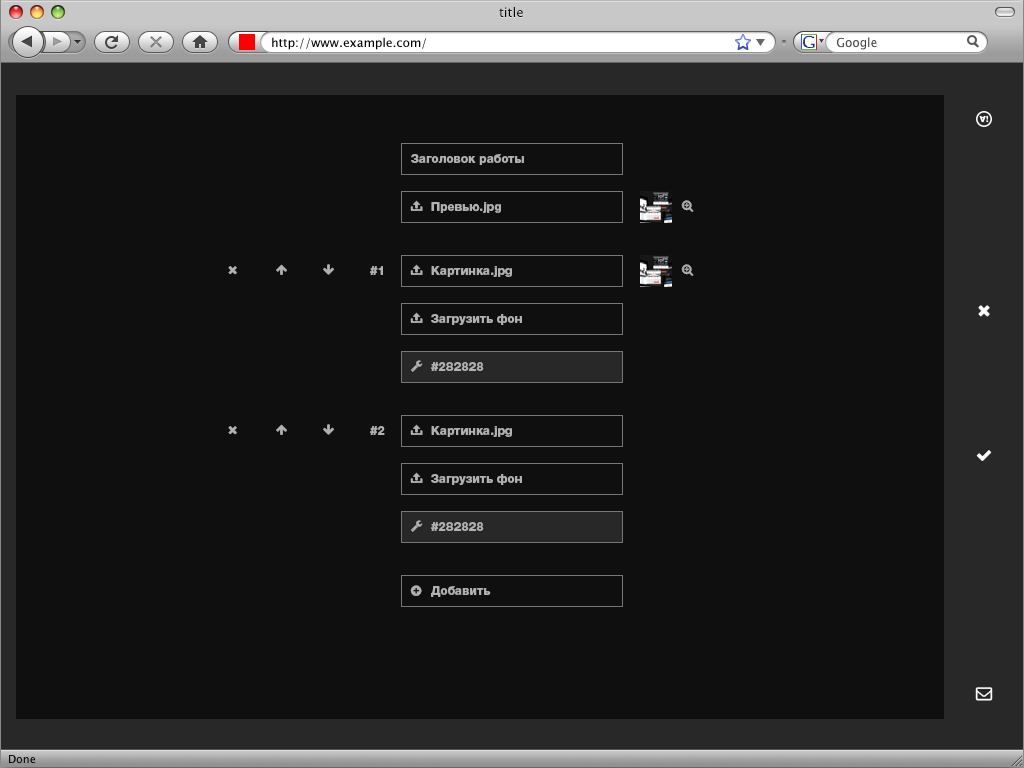
<style>
.page{position:relative;width:1024px;height:768px;background:#0f0f0f}
.page>*{position:absolute;margin:0}
.t1{font:12px "HelveticaNeueCyr-Heavy";color:#b1b1b1}
</style>
<div class="page">
<p class="t1" style="left:411px;top:154px;width:113px;height:11px">Заголовок работы</p>
<p class="t1" style="left:431px;top:202px;width:70px;height:11px">Превью.jpg</p>
<p class="t1" style="left:370px;top:266px;width:13px;height:9px">#1</p>
<p class="t1" style="left:431px;top:266px;width:81px;height:11px">Картинка.jpg</p>
<p class="t1" style="left:431px;top:314px;width:91px;height:11px">Загрузить фон</p>
<p class="t1" style="left:431px;top:362px;width:53px;height:9px">#282828</p>
<p class="t1" style="left:370px;top:426px;width:15px;height:9px">#2</p>
<p class="t1" style="left:431px;top:426px;width:81px;height:11px">Картинка.jpg</p>
<p class="t1" style="left:431px;top:474px;width:91px;height:11px">Загрузить фон</p>
<p class="t1" style="left:431px;top:522px;width:53px;height:9px">#282828</p>
<p class="t1" style="left:431px;top:586px;width:60px;height:11px">Добавить</p>
</div>
